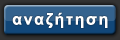
<style>
.page{position:relative;width:120px;height:40px}
.page>*{position:absolute;margin:0}
.t1{font:16px "Arial-BoldMT";letter-spacing:0.1em;color:#ffffff}
</style>
<div class="page">
<p class="t1" style="left:12px;top:12px;width:96px;height:16px">αναζήτηση</p>
</div>
